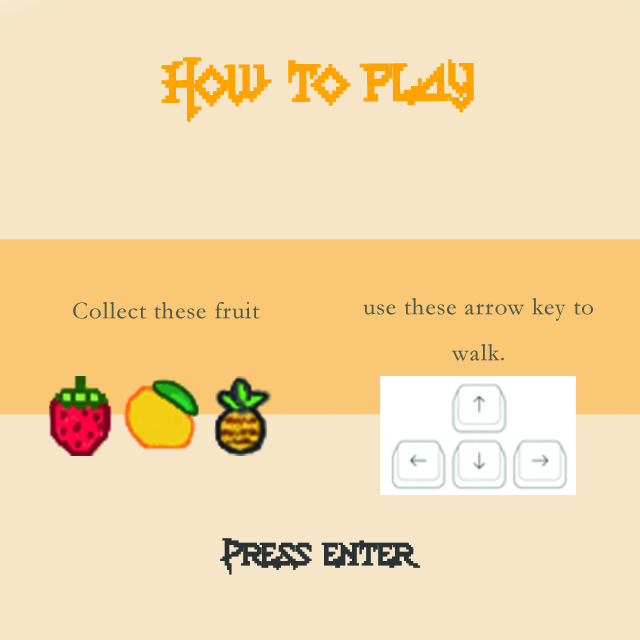
<style>
.page{position:relative;width:640px;height:640px;background:#f6e5c6}
.page>*{position:absolute;margin:0}
.t1{font:41.7px "Lady-Radical-2";letter-spacing:0.03em;color:#ffa300;scale:0.95 1}
.t2{font:25px "Garamond";letter-spacing:0.03em;color:#515a48}
.t3{font:25px/45.8px "Garamond";letter-spacing:0.03em;color:#515a48}
.t4{font:25px "Lady-Radical-2";letter-spacing:0.03em;color:#2a3235}
</style>
<div class="page">
<p class="t1" style="left:161px;top:57px;width:313px;height:65px">How to play</p>
<p class="t2" style="left:73px;top:302px;width:187px;height:17px">Collect these fruit</p>
<p class="t3" style="left:363px;top:298px;width:230px;height:63px;text-align:center">use these arrow key to <br>walk.</p>
<p class="t4" style="left:220px;top:538px;width:200px;height:37px">Press enter</p>
</div>
